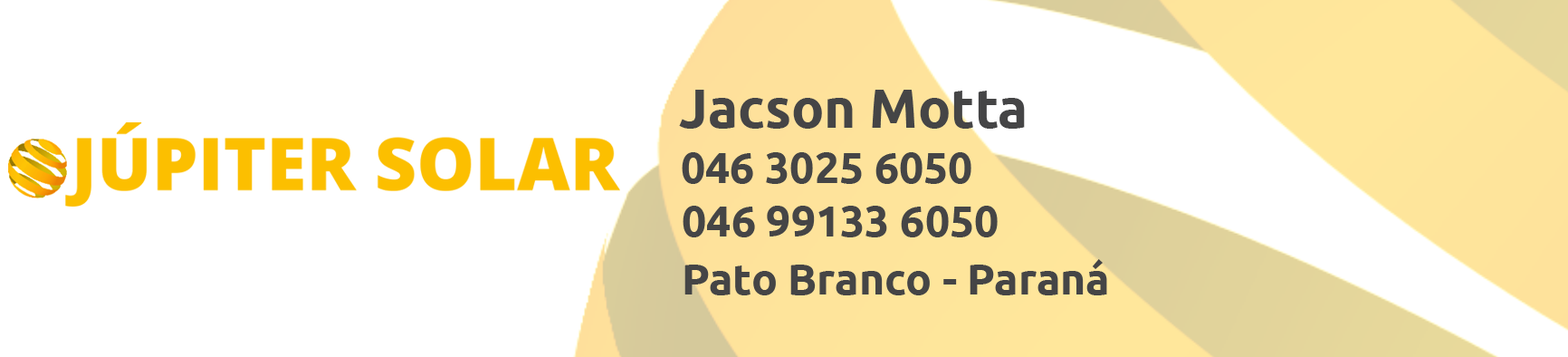
<style>
.page{position:relative;width:1568px;height:357px;background:#ffffff}
.page>*{position:absolute;margin:0}
.t1{font:54.3px "Ubuntu-Bold";color:#454546}
.t2{font:43.5px "Ubuntu-Bold";color:#454546}
</style>
<div class="page">
<p class="t1" style="left:679px;top:90px;width:346px;height:39px">Jacson Motta</p>
<p class="t2" style="left:682px;top:152px;width:289px;height:32px">046 3025 6050</p>
<p class="t2" style="left:683px;top:206px;width:315px;height:31px">046 99133 6050</p>
<p class="t2" style="left:684px;top:259px;width:423px;height:36px">Pato Branco - Paraná</p>
</div>
